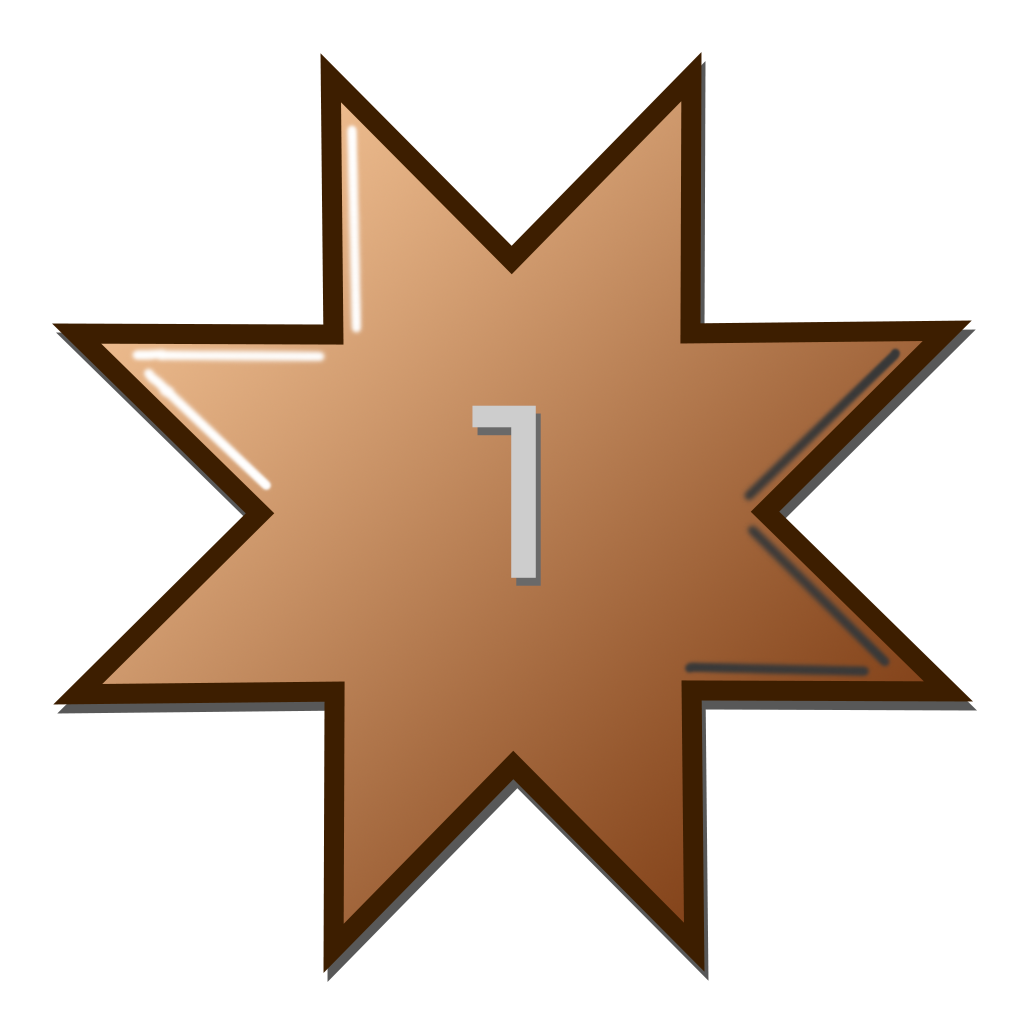
<style>
.page{position:relative;width:1024px;height:1024px;background:#ffffff}
.page>*{position:absolute;margin:0}
.t1{font:245.4px "Montserrat-Medium";color:#cdcdcd}
</style>
<div class="page">
<p class="t1" style="left:472px;top:405px;width:64px;height:173px">1</p>
<p class="t1" style="left:477px;top:413px;width:64px;height:173px">1</p>
</div>
